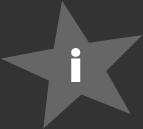
<style>
.page{position:relative;width:143px;height:129px;background:#333333}
.page>*{position:absolute;margin:0}
.t1{font:48px "Bauhaus93";color:#ffffff}
</style>
<div class="page">
<p class="t1" style="left:71px;top:48px;width:10px;height:34px">i</p>
</div>
